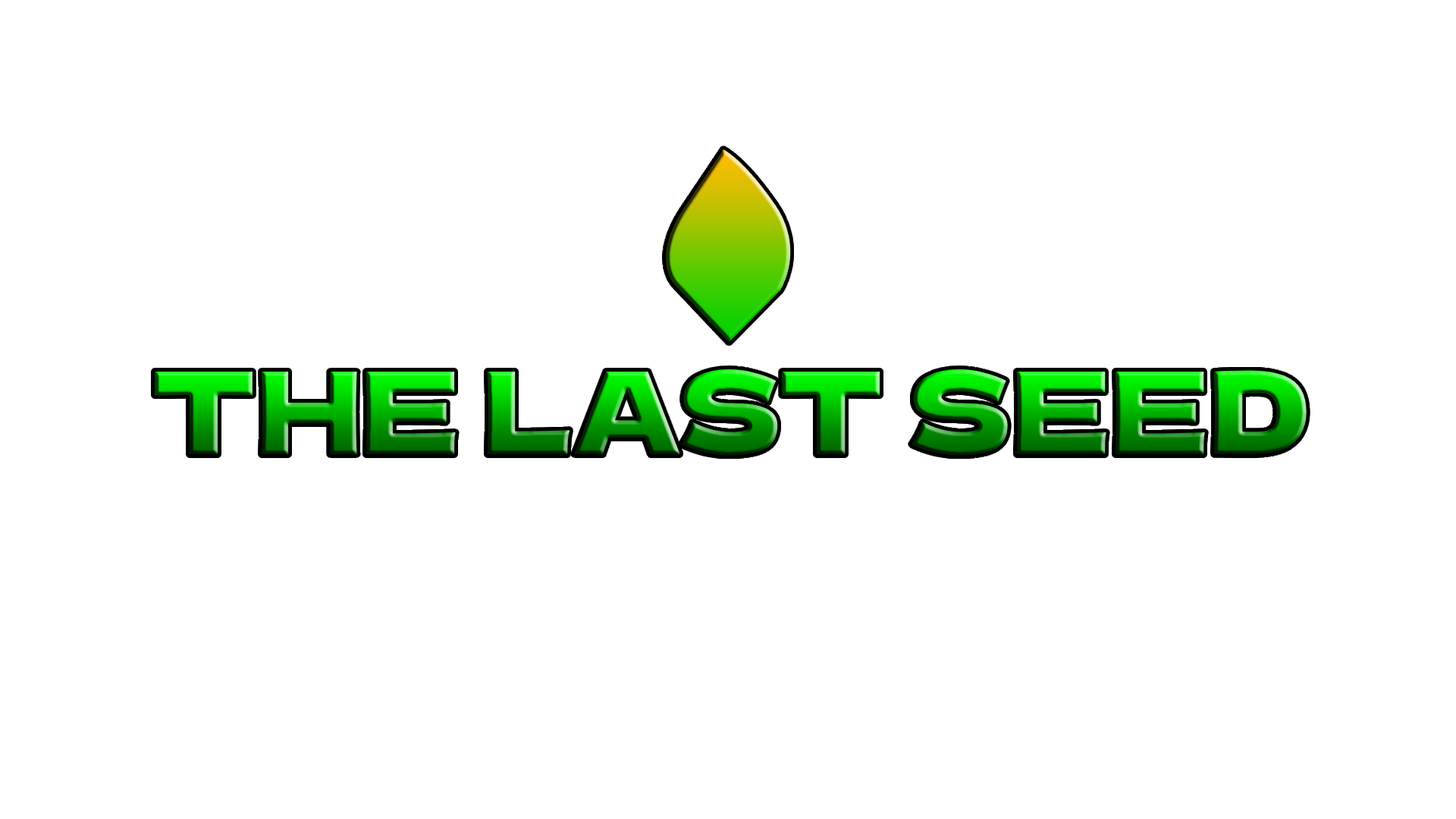
<style>
.page{position:relative;width:1456px;height:819px;background:#ffffff}
.page>*{position:absolute;margin:0}
.t1{font:113.7px "DelaGothicOne-Regular"}
</style>
<div class="page">
<p class="t1" style="left:155px;top:369px;width:1152px;height:87px">THE LAST SEED</p>
</div>
